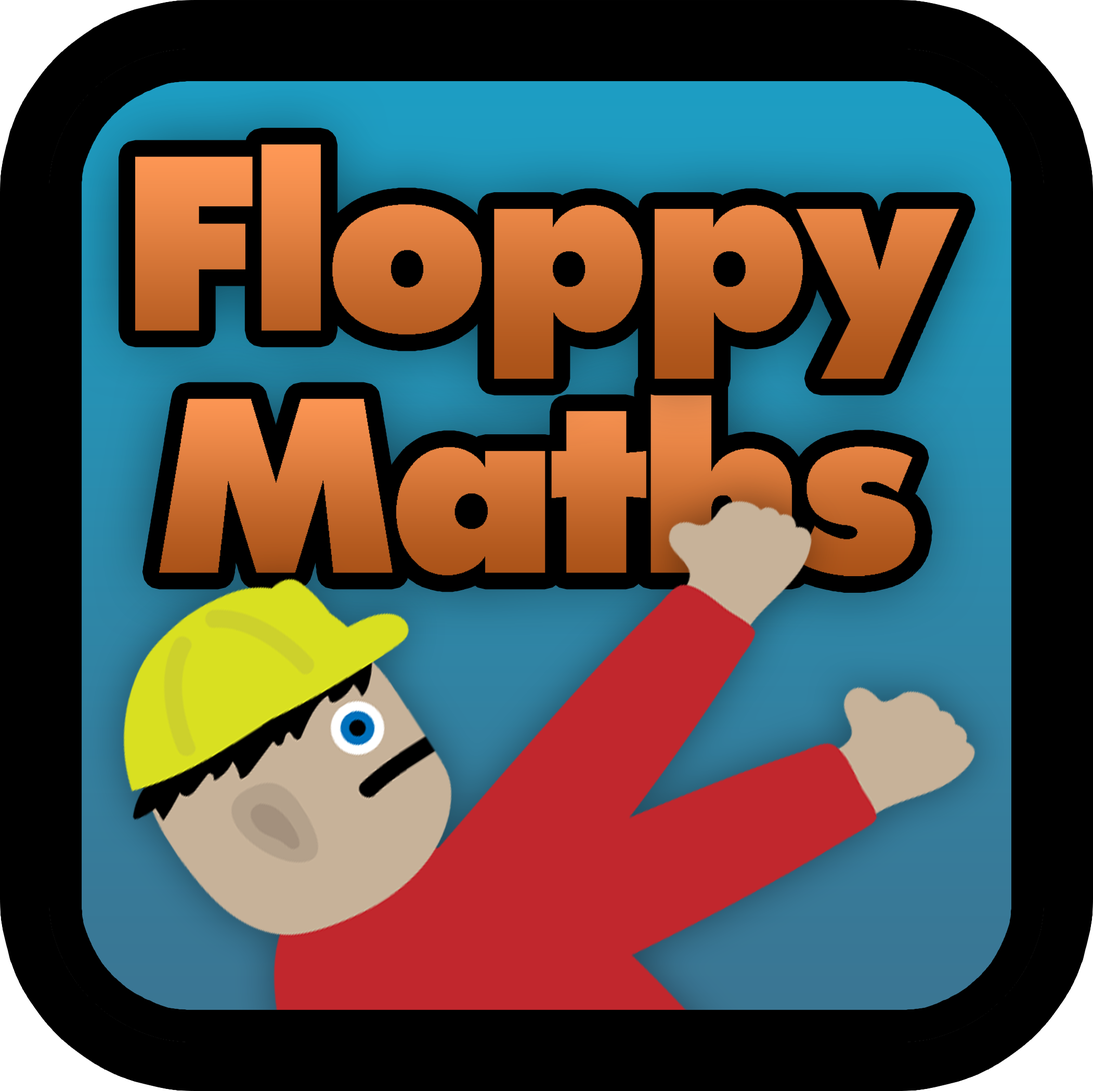
<style>
.page{position:relative;width:1093px;height:1091px;background:#000000}
.page>*{position:absolute;margin:0}
.t1{font:248.6px "IntrepidExtraBold"}
</style>
<div class="page">
<p class="t1" style="left:135px;top:144px;width:823px;height:235px">Floppy</p>
<p class="t1" style="left:159px;top:387px;width:756px;height:189px">Maths</p>
</div>
